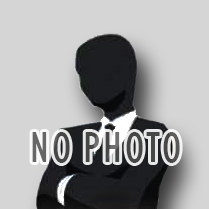
<style>
.page{position:relative;width:209px;height:209px;background:#d5d5d5}
.page>*{position:absolute;margin:0}
.t1{font:45px "GillSansMT-Condensed";letter-spacing:0.075em;color:#474747}
</style>
<div class="page">
<p class="t1" style="left:32px;top:132px;width:148px;height:31px">NO PHOTO</p>
</div>
